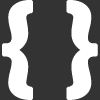
<style>
.page{position:relative;width:100px;height:100px;background:#333333}
.page>*{position:absolute;margin:0}
.t1{font:106px "LucidaSans-Demi";letter-spacing:-0.02em;color:#ffffff;font-weight:bold}
</style>
<div class="page">
<p class="t1" style="left:2px;top:0px;width:96px;height:100px">{ }</p>
</div>
